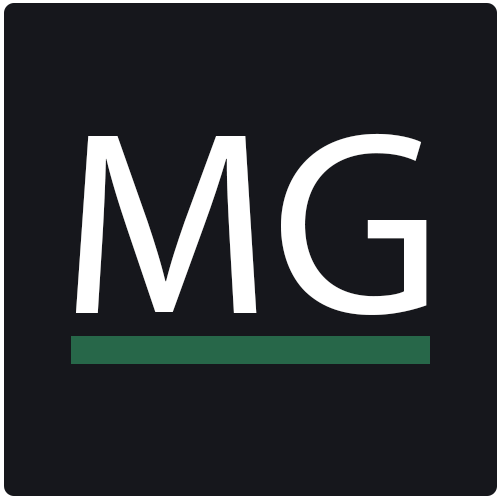
<style>
.page{position:relative;width:500px;height:500px;background:#16171c}
.page>*{position:absolute;margin:0}
.t1{font:262px "MyriadPro-Regular";color:#ffffff}
</style>
<div class="page">
<p class="t1" style="left:76px;top:133px;width:351px;height:182px">MG</p>
</div>
